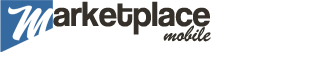
<style>
.page{position:relative;width:316px;height:60px;background:#ffffff}
.page>*{position:absolute;margin:0}
.t1{font:36px "CoolveticaRg-Regular";color:#35312a}
.t2{font:24px "BrushScriptMT";color:#35312a}
</style>
<div class="page">
<p class="t1" style="left:53px;top:1px;width:157px;height:34px">arketplace</p>
<p class="t2" style="left:163px;top:25px;width:48px;height:17px">mobile</p>
</div>
